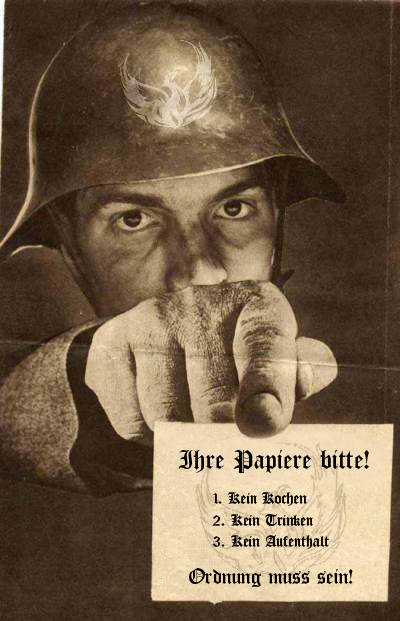
<style>
.page{position:relative;width:400px;height:621px}
.page>*{position:absolute;margin:0}
.t1{font:30px "Iglesia-Light";color:#000000}
.t2{font:18px "Iglesia-Light";color:#000000}
.t3{font:24px "Iglesia-Light";color:#000000}
</style>
<div class="page">
<p class="t1" style="left:178px;top:450px;width:191px;height:23px">Ihre Papiere bitte!</p>
<p class="t2" style="left:212px;top:492px;width:117px;height:57px">1. Kein Kochen<br>2. Kein Trinken<br>3. Kein Aufenthalt</p>
<p class="t3" style="left:189px;top:568px;width:164px;height:19px">Ordnung muss sein!</p>
</div>
